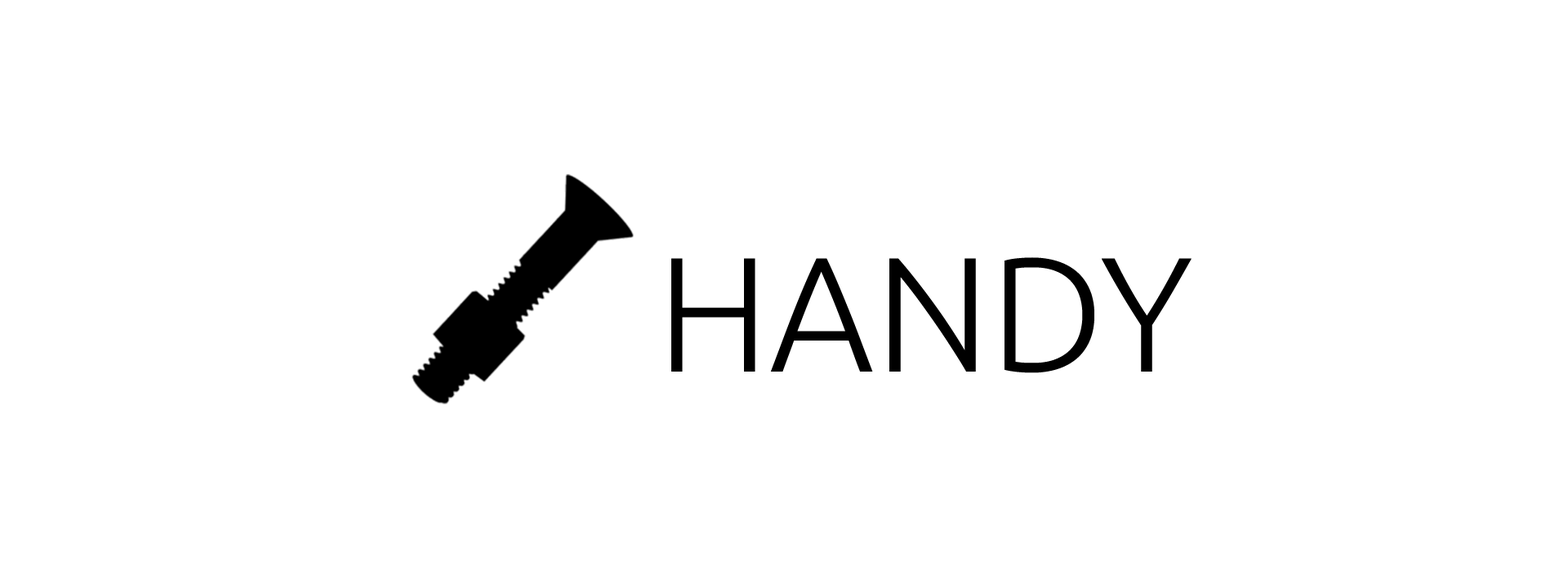
<style>
.page{position:relative;width:1568px;height:588px;background:#ffffff}
.page>*{position:absolute;margin:0}
.t1{font:162.9px "Ubuntu-Light";color:#000000}
</style>
<div class="page">
<p class="t1" style="left:671px;top:257px;width:521px;height:116px">HANDY</p>
</div>
